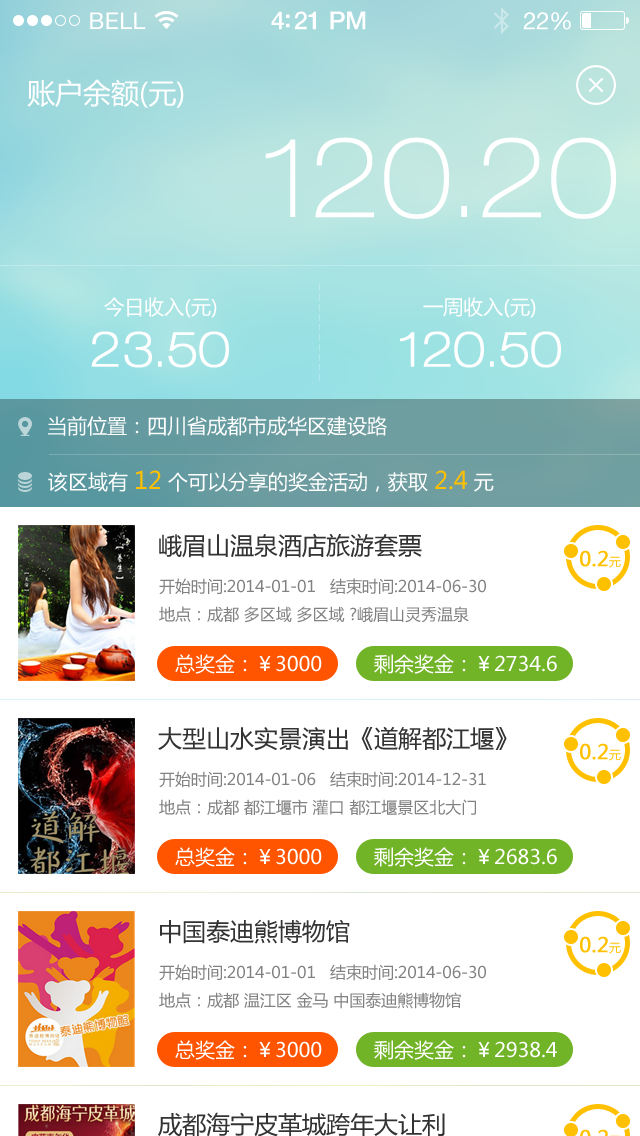
<style>
.page{position:relative;width:640px;height:1136px;background:#ffffff}
.page>*{position:absolute;margin:0}
.t1{font:23px "HelveticaNeue";letter-spacing:0.02em;color:#ffffff}
.t2{font:25px "HelveticaNeue-Medium";letter-spacing:-0.02em;color:#ffffff}
.t3{font:24px "HelveticaNeue";letter-spacing:-0.02em;color:#ffffff}
.t4{font:28px "MicrosoftYaHei";color:#ffffff}
.t5{font:110px "HelveticaNeueLTPro-ThEx";color:#ffffff}
.t6{font:20px "MicrosoftYaHei";color:#ffffff}
.t7{font:48px "HelveticaNeueLTPro-ThEx";color:#ffffff;font-weight:bold}
.t8{font:24px "MicrosoftYaHei";color:#ffc000}
.t9{font:24px "MicrosoftYaHei";color:#333333}
.t10{font:20px "MicrosoftYaHei";color:#ffc000;font-weight:bold}
.t11{font:12px "MicrosoftYaHei";color:#ffc000}
.t12{font:16px "MicrosoftYaHei";color:#818181}
</style>
<div class="page">
<p class="t1" style="left:90px;top:12px;width:56px;height:17px">BELL</p>
<p class="t2" style="left:271px;top:11px;width:95px;height:19px">4:21 PM</p>
<p class="t3" style="left:523px;top:12px;width:48px;height:18px">22%</p>
<p class="t4" style="left:27px;top:79px;width:157px;height:29px">账户余额(元)</p>
<p class="t5" style="left:265px;top:137px;width:351px;height:82px">120.20</p>
<p class="t6" style="left:104px;top:297px;width:113px;height:21px">今日收入(元)</p>
<p class="t6" style="left:423px;top:297px;width:113px;height:21px">一周收入(元)</p>
<p class="t7" style="left:91px;top:331px;width:138px;height:37px">23.50</p>
<p class="t7" style="left:400px;top:331px;width:161px;height:37px">120.50</p>
<p class="t6" style="left:48px;top:416px;width:339px;height:20px">当前位置：四川省成都市成华区建设路</p>
<p class="t6" style="left:48px;top:470px;width:446px;height:22px">该区域有 <span class="t8">12</span> 个可以分享的奖金活动，获取 <span class="t8">2.4</span> 元</p>
<p class="t9" style="left:159px;top:533px;width:263px;height:25px">峨眉山温泉酒店旅游套票</p>
<p class="t10" style="left:580px;top:550px;width:41px;height:18px">0.2<span class="t11">元</span></p>
<p class="t12" style="left:159px;top:578px;width:327px;height:17px">开始时间:2014-01-01   结束时间:2014-06-30</p>
<p class="t12" style="left:159px;top:606px;width:310px;height:17px">地点：成都 多区域 多区域 ?峨眉山灵秀温泉</p>
<p class="t6" style="left:175px;top:654px;width:147px;height:20px">总奖金：￥3000</p>
<p class="t6" style="left:374px;top:654px;width:183px;height:20px">剩余奖金：￥2734.6</p>
<p class="t9" style="left:158px;top:726px;width:349px;height:25px">大型山水实景演出《道解都江堰》</p>
<p class="t10" style="left:580px;top:743px;width:41px;height:18px">0.2<span class="t11">元</span></p>
<p class="t12" style="left:159px;top:771px;width:327px;height:17px">开始时间:2014-01-06   结束时间:2014-12-31</p>
<p class="t12" style="left:159px;top:799px;width:317px;height:17px">地点：成都 都江堰市 灌口 都江堰景区北大门</p>
<p class="t6" style="left:175px;top:847px;width:147px;height:20px">总奖金：￥3000</p>
<p class="t6" style="left:374px;top:847px;width:183px;height:20px">剩余奖金：￥2683.6</p>
<p class="t9" style="left:160px;top:919px;width:190px;height:25px">中国泰迪熊博物馆</p>
<p class="t10" style="left:580px;top:936px;width:41px;height:18px">0.2<span class="t11">元</span></p>
<p class="t12" style="left:159px;top:964px;width:327px;height:17px">开始时间:2014-01-01   结束时间:2014-06-30</p>
<p class="t12" style="left:159px;top:992px;width:302px;height:17px">地点：成都 温江区 金马 中国泰迪熊博物馆</p>
<p class="t6" style="left:175px;top:1040px;width:147px;height:20px">总奖金：￥3000</p>
<p class="t6" style="left:374px;top:1040px;width:183px;height:20px">剩余奖金：￥2938.4</p>
<p class="t9" style="left:158px;top:1112px;width:287px;height:25px">成都海宁皮革城跨年大让利</p>
</div>
